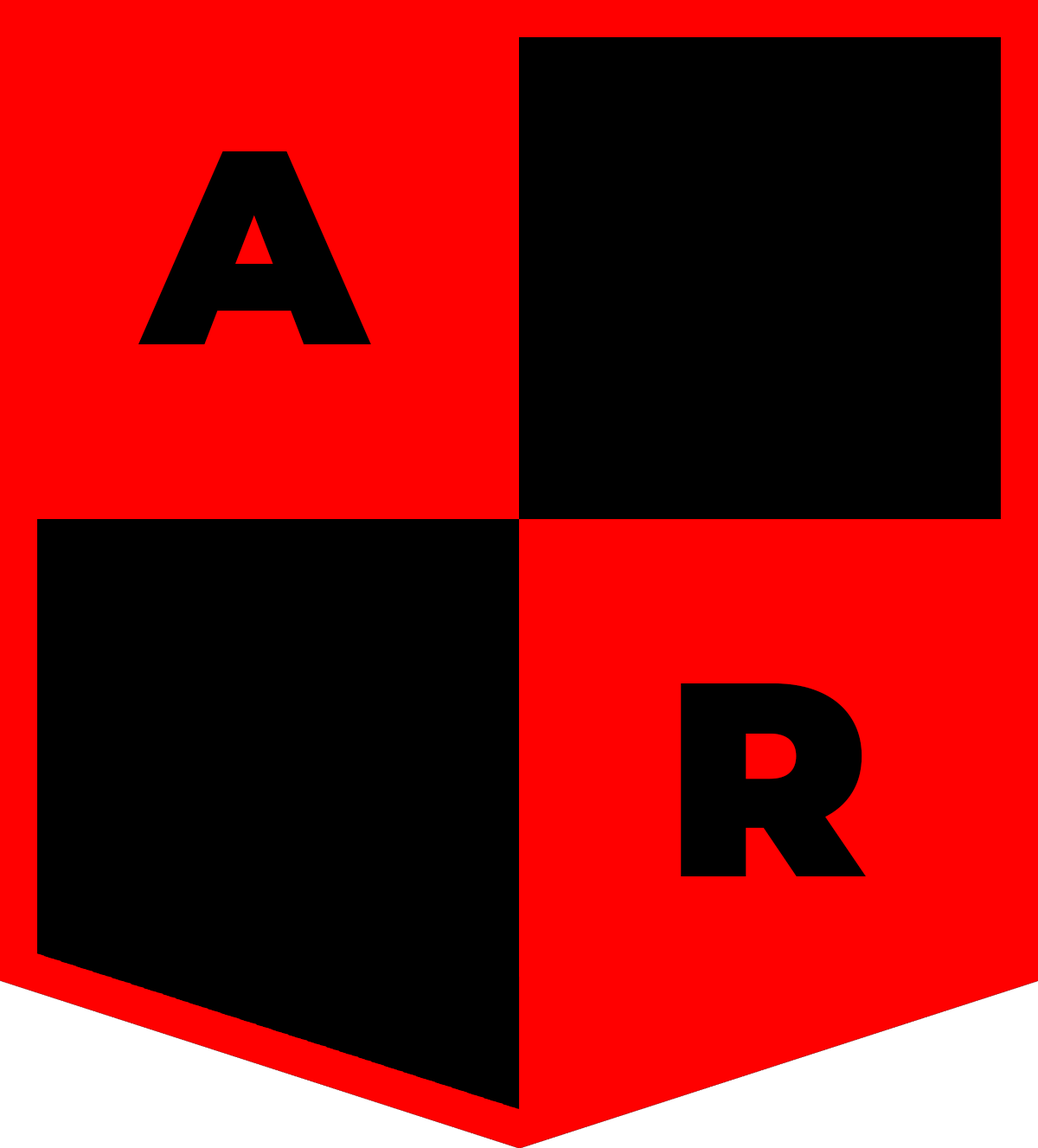
<style>
.page{position:relative;width:1038px;height:1148px;background:#ff0000}
.page>*{position:absolute;margin:0}
.t1{font:275.7px "Montserrat-Black";color:#000000}
</style>
<div class="page">
<p class="t1" style="left:138px;top:151px;width:233px;height:193px">A</p>
<p class="t1" style="left:681px;top:683px;width:185px;height:194px">R</p>
</div>
